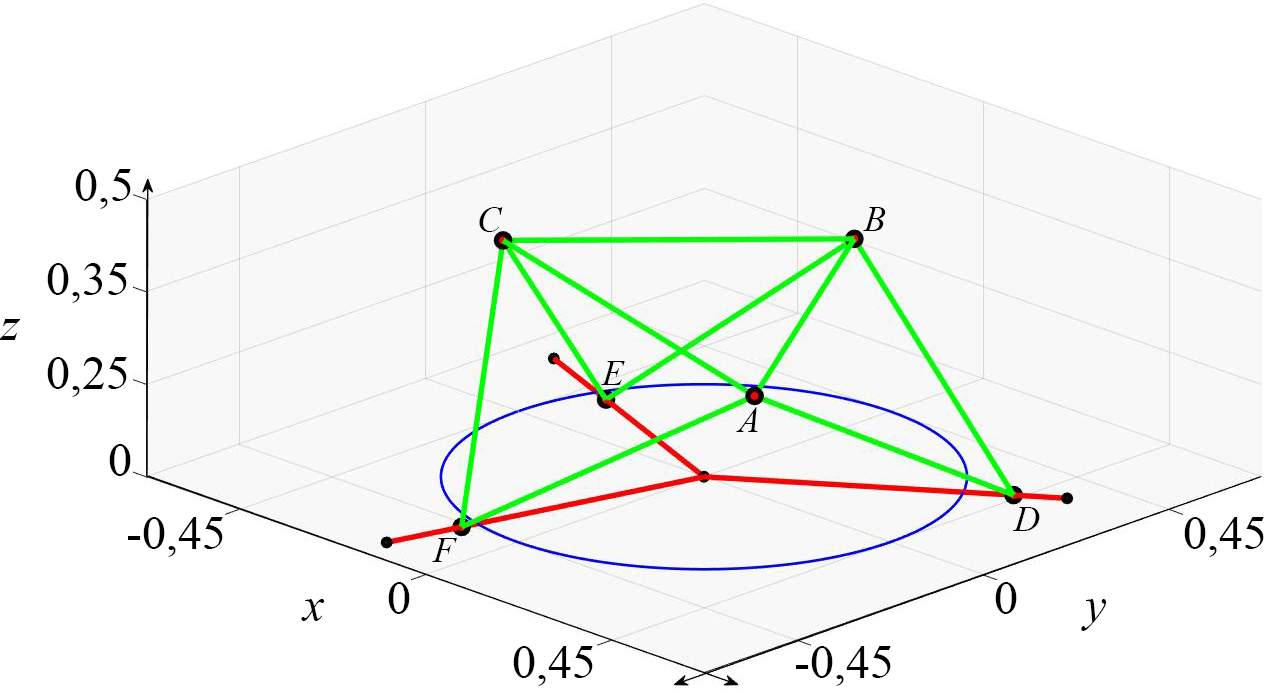
<style>
.page{position:relative;width:1267px;height:695px;background:#f8f8f8}
.page>*{position:absolute;margin:0}
.t1{font:48px "TimesNewRomanPSMT";color:#000000}
.t2{font:36px "TimesNewRomanPS-ItalicMT";color:#000000}
.t3{font:48px "TimesNewRomanPS-ItalicMT";color:#000000}
</style>
<div class="page">
<p class="t1" style="left:75px;top:169px;width:56px;height:40px">0,5</p>
<p class="t2" style="left:479px;top:207px;width:24px;height:25px">C</p>
<p class="t2" style="left:863px;top:207px;width:23px;height:24px">B</p>
<p class="t1" style="left:47px;top:263px;width:80px;height:40px">0,35</p>
<p class="t3" style="left:0px;top:319px;width:20px;height:21px">z</p>
<p class="t1" style="left:47px;top:357px;width:80px;height:40px">0,25</p>
<p class="t2" style="left:601px;top:361px;width:24px;height:24px">E</p>
<p class="t2" style="left:736px;top:407px;width:22px;height:25px">A</p>
<p class="t1" style="left:109px;top:444px;width:22px;height:32px">0</p>
<p class="t2" style="left:1013px;top:507px;width:27px;height:24px">D</p>
<p class="t1" style="left:128px;top:517px;width:95px;height:40px">-0,45</p>
<p class="t1" style="left:1184px;top:517px;width:80px;height:40px">0,45</p>
<p class="t2" style="left:432px;top:538px;width:25px;height:24px">F</p>
<p class="t1" style="left:388px;top:582px;width:22px;height:32px">0</p>
<p class="t1" style="left:995px;top:582px;width:22px;height:32px">0</p>
<p class="t3" style="left:301px;top:599px;width:23px;height:22px">x</p>
<p class="t3" style="left:1081px;top:599px;width:25px;height:32px">y</p>
<p class="t1" style="left:513px;top:646px;width:80px;height:40px">0,45</p>
<p class="t1" style="left:796px;top:646px;width:95px;height:40px">-0,45</p>
</div>
